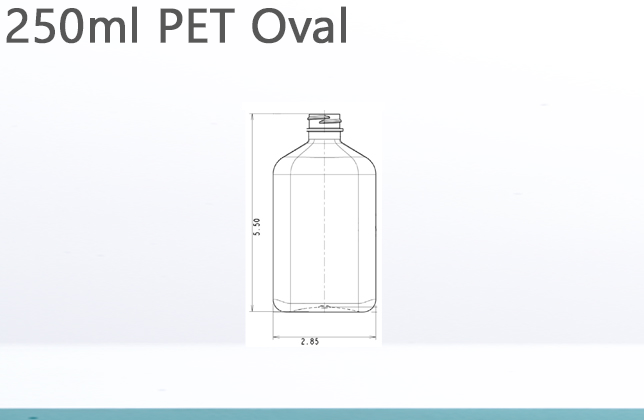
<style>
.page{position:relative;width:644px;height:420px}
.page>*{position:absolute;margin:0}
.t1{font:48px "Gadugi";color:#575757;font-weight:bold}
</style>
<div class="page">
<p class="t1" style="left:6px;top:6px;width:340px;height:38px">250ml PET Oval</p>
</div>
